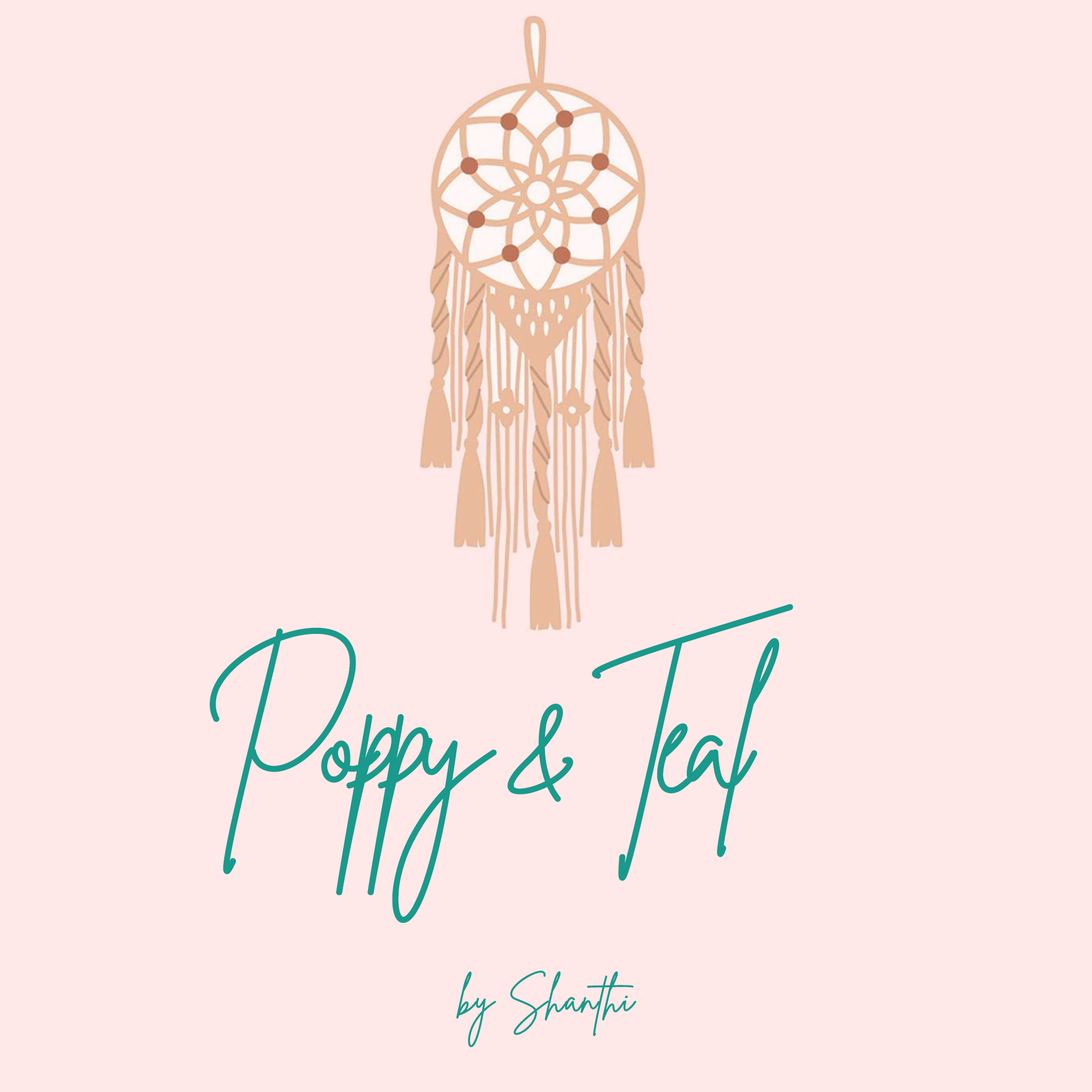
<style>
.page{position:relative;width:1092px;height:1092px;background:#ffe8e8}
.page>*{position:absolute;margin:0}
.t1{font:154.7px "BrittanySignatureRegular";letter-spacing:-0.1em;color:#199a8c}
.t2{font:40.9px "BrittanySignatureRegular";color:#199a8c;font-weight:bold}
</style>
<div class="page">
<p class="t1" style="left:210px;top:604px;width:583px;height:319px">Poppy &amp; Teal</p>
<p class="t2" style="left:456px;top:970px;width:181px;height:77px">by Shanthi</p>
</div>
